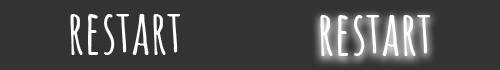
<style>
.page{position:relative;width:500px;height:70px;background:#333333}
.page>*{position:absolute;margin:0}
.t1{font:60px "AmaticSC-Bold";color:#ffffff}
</style>
<div class="page">
<p class="t1" style="left:70px;top:14px;width:110px;height:41px">restart</p>
<p class="t1" style="left:320px;top:15px;width:110px;height:41px">restart</p>
</div>
